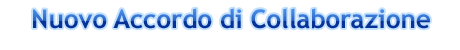
<style>
.page{position:relative;width:460px;height:50px;background:#ffffff}
.page>*{position:absolute;margin:0}
.t1{font:26px "TrebuchetMS-Bold"}
</style>
<div class="page">
<p class="t1" style="left:33px;top:8px;width:397px;height:21px">Nuovo Accordo di Collaborazione</p>
</div>
